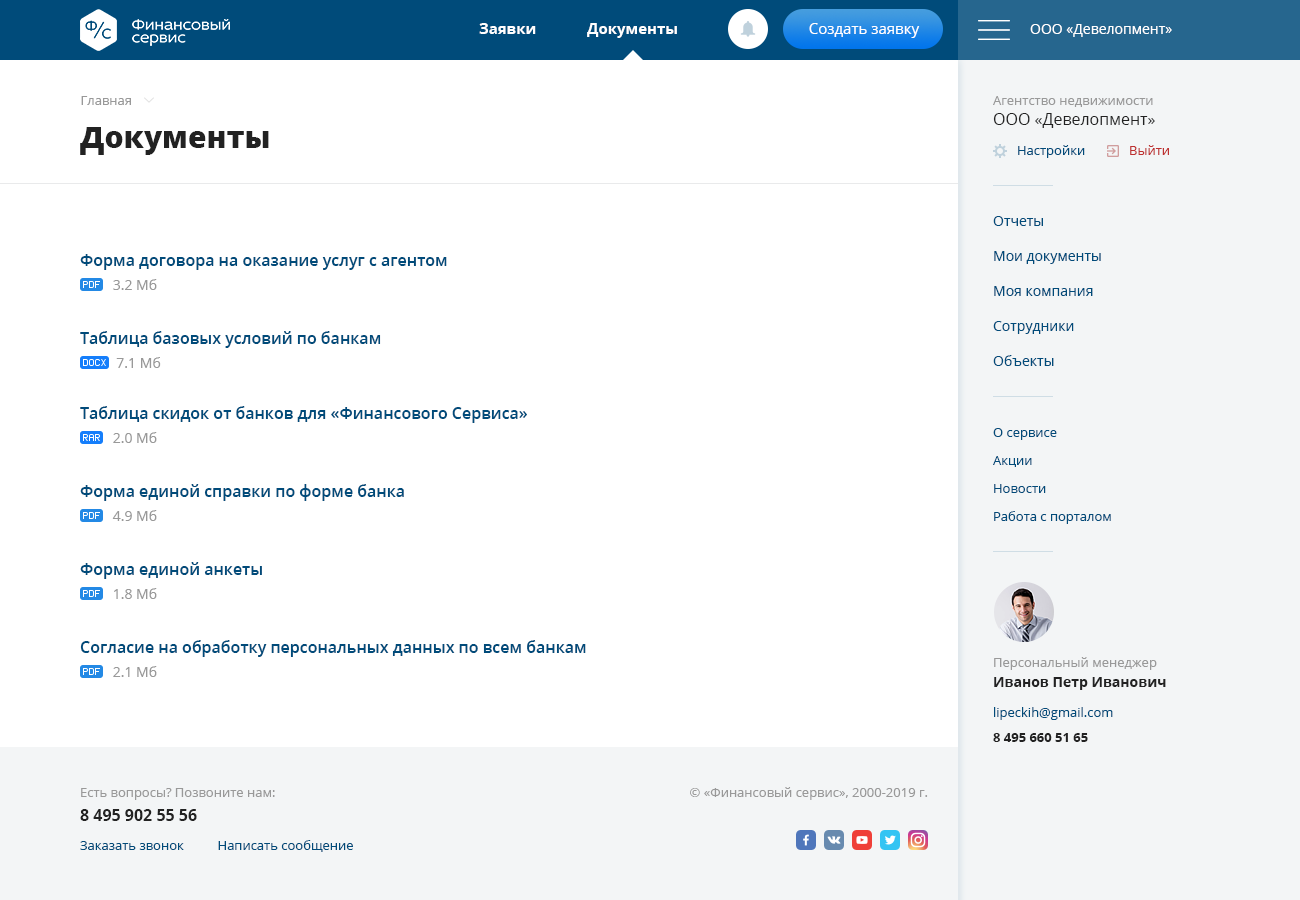
<style>
.page{position:relative;width:1300px;height:900px;background:#ffffff}
.page>*{position:absolute;margin:0}
.t1{font:15px "OpenSans-Bold";color:#ffffff}
.t2{font:15px "OpenSans";color:#ffffff}
.t3{font:14px "OpenSans";color:#ffffff}
.t4{font:13px "OpenSans";color:#999999}
.t5{font:16px/20px "OpenSans";color:#222222}
.t6{font:30px "OpenSans-Extrabold";color:#222222}
.t7{font:13px "OpenSans";color:#004b7a}
.t8{font:13px "OpenSans";color:#be3030}
.t9{font:14px/35px "OpenSans";color:#004b7a}
.t10{font:16px "OpenSans-Semibold";color:#004b7a}
.t11{font:14px/24px "OpenSans";color:#999999}
.t12{font:13px/28px "OpenSans";color:#004b7a}
.t13{font:14px/20px "OpenSans-Bold";color:#222222}
.t14{font:13px "OpenSans-Bold";color:#222222}
.t15{font:13px/24px "OpenSans";color:#999999}
.t16{font:16px/24px "OpenSans-Bold";color:#222222}
</style>
<div class="page">
<p class="t1" style="left:479px;top:23px;width:198px;height:15px">Заявки             Документы</p>
<p class="t2" style="left:809px;top:23px;width:111px;height:15px">Создать заявку</p>
<p class="t3" style="left:1030px;top:24px;width:142px;height:13px">ООО «Девелопмент»</p>
<p class="t4" style="left:81px;top:96px;width:50px;height:9px">Главная</p>
<p class="t4" style="left:993px;top:96px;width:162px;height:32px">Агентство недвижимости<br><span class="t5">ООО «Девелопмент»</span></p>
<p class="t6" style="left:80px;top:127px;width:189px;height:28px">Документы</p>
<p class="t7" style="left:1018px;top:145px;width:151px;height:13px">Настройки             <span class="t8">Выйти</span></p>
<p class="t9" style="left:993px;top:216px;width:108px;height:150px">Отчеты<br>Мои документы<br>Моя компания<br>Сотрудники<br>Объекты</p>
<p class="t10" style="left:80px;top:254px;width:367px;height:36px">Форма договора на оказание услуг с агентом  <br><span class="t11">         3.2 Мб</span></p>
<p class="t10" style="left:80px;top:331px;width:301px;height:37px">Таблица базовых условий по банкам<br><span class="t11">          7.1 Мб</span></p>
<p class="t10" style="left:80px;top:406px;width:447px;height:37px">Таблица скидок от банков для «Финансового Сервиса»<br><span class="t11">         2.0 Мб</span></p>
<p class="t12" style="left:993px;top:428px;width:118px;height:96px">О сервисе<br>Акции<br>Новости<br>Работа с порталом</p>
<p class="t10" style="left:80px;top:484px;width:324px;height:37px">Форма единой справки по форме банка <br><span class="t11">         4.9 Мб</span></p>
<p class="t10" style="left:80px;top:562px;width:182px;height:37px">Форма единой анкеты<br><span class="t11">         1.8 Мб</span></p>
<p class="t10" style="left:80px;top:640px;width:506px;height:37px">Согласие на обработку персональных данных по всем банкам<br><span class="t11">         2.1 Мб</span></p>
<p class="t4" style="left:994px;top:657px;width:172px;height:33px">Персональный менеджер<br><span class="t13">Иванов Петр Иванович</span></p>
<p class="t7" style="left:994px;top:707px;width:119px;height:13px">lipeckih@gmail.com</p>
<p class="t14" style="left:993px;top:733px;width:95px;height:9px">8 495 660 51 65</p>
<p class="t15" style="left:80px;top:788px;width:195px;height:33px">Есть вопросы? Позвоните нам:<br><span class="t16">8 495 902 55 56</span></p>
<p class="t4" style="left:690px;top:787px;width:238px;height:13px">© «Финансовый сервис», 2000-2019 г.</p>
<p class="t7" style="left:80px;top:840px;width:273px;height:12px">Заказать звонок          Написать сообщение</p>
</div>
